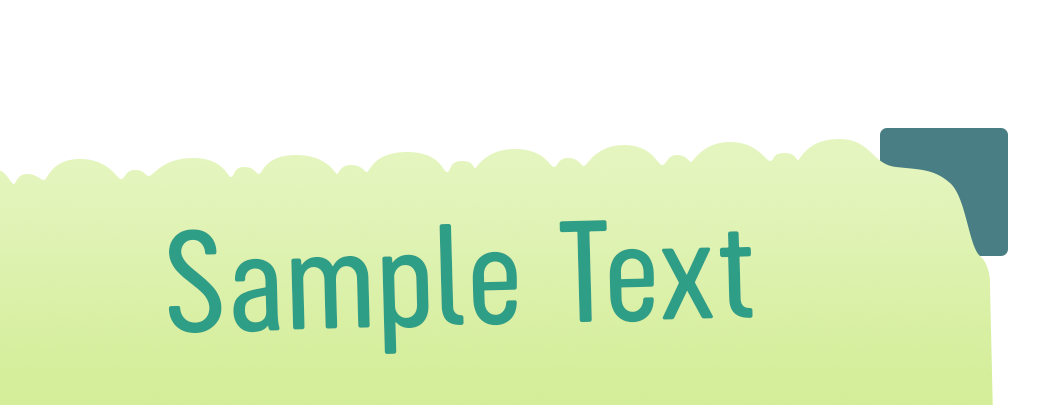
<style>
.page{position:relative;width:1043px;height:405px;background:#ffffff}
.page>*{position:absolute;margin:0}
.t1{font:133.3px "Cervino-MediumNeue";color:#2f9e87;font-weight:bold}
</style>
<div class="page">
<p class="t1" style="left:168px;top:220px;width:585px;height:134px;rotate:-2deg">Sample Text</p>
</div>
